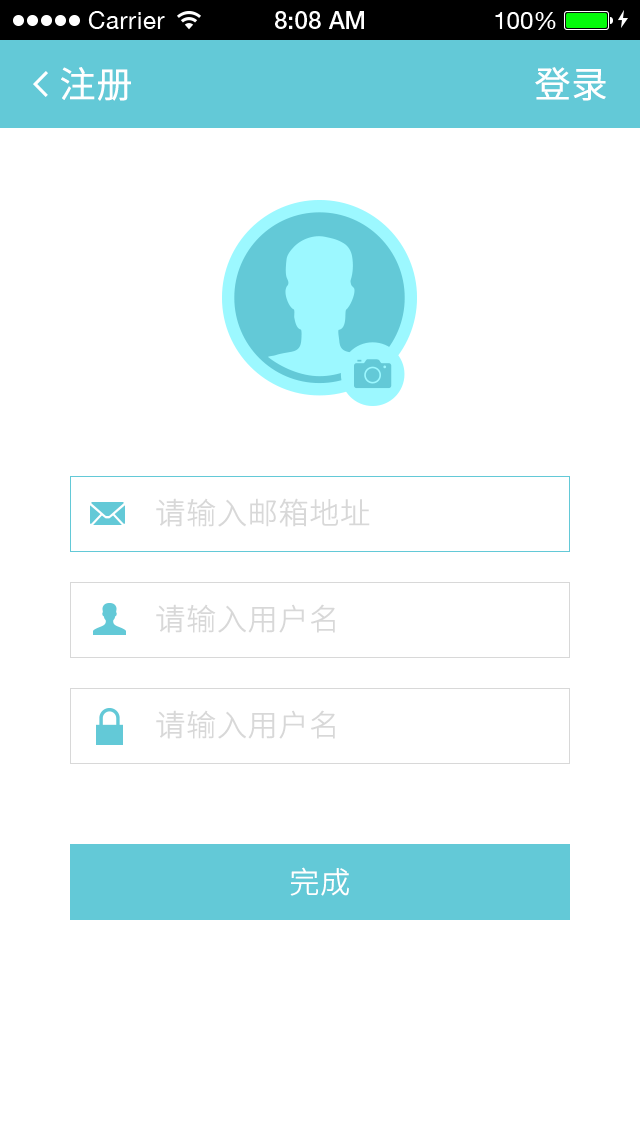
<style>
.page{position:relative;width:640px;height:1136px;background:#ffffff}
.page>*{position:absolute;margin:0}
.t1{font:36px "SourceHanSansCN-Normal";color:#ffffff;font-weight:bold}
.t2{font:30px "SourceHanSansCN-Light";color:#d8d8d8;font-weight:bold}
.t3{font:30px "SourceHanSansCN-Light";color:#ffffff;font-weight:bold}
</style>
<div class="page">
<p class="t1" style="left:61px;top:67px;width:70px;height:34px">注册</p>
<p class="t1" style="left:535px;top:67px;width:71px;height:34px">登录</p>
<p class="t2" style="left:156px;top:498px;width:214px;height:29px">请输入邮箱地址</p>
<p class="t2" style="left:156px;top:604px;width:179px;height:29px">请输入用户名</p>
<p class="t2" style="left:156px;top:710px;width:179px;height:29px">请输入用户名</p>
<p class="t3" style="left:290px;top:867px;width:59px;height:29px">完成</p>
</div>
